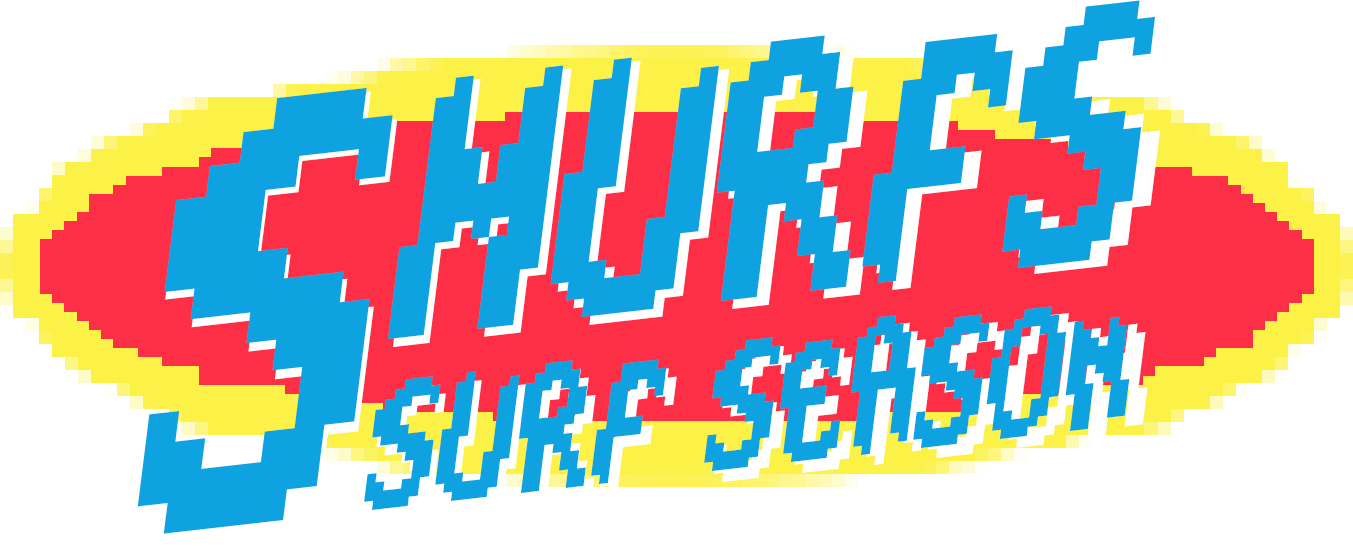
<style>
.page{position:relative;width:1353px;height:546px;background:#ffffff}
.page>*{position:absolute;margin:0}
.t1{font:75.4px/104.8px "The-Smurfs---Large-Font";letter-spacing:-0.025em}
.t2{font:251.5px/150.9px "The-Smurfs---Large-Font";letter-spacing:-0.025em}
.t3{font:150.9px/94.3px "The-Smurfs---Large-Font";letter-spacing:-0.025em}
.t4{font:74.1px/102.9px "The-Smurfs---Large-Font";letter-spacing:-0.025em;color:#0ea2e0}
.t5{font:247px/148.2px "The-Smurfs---Large-Font";letter-spacing:-0.025em;color:#0ea2e0}
.t6{font:148.2px/92.6px "The-Smurfs---Large-Font";letter-spacing:-0.025em;color:#0ea2e0}
</style>
<div class="page">
<p class="t1" style="left:137px;top:1px;width:1038px;height:545px;rotate:-6deg"><span class="t2">s</span><span class="t3">murfs <br>      </span>Surf Season</p>
<p class="t4" style="left:137px;top:0px;width:1019px;height:534px;rotate:-6deg"><span class="t5">s</span><span class="t6">murfs <br>      </span>Surf Season</p>
</div>
